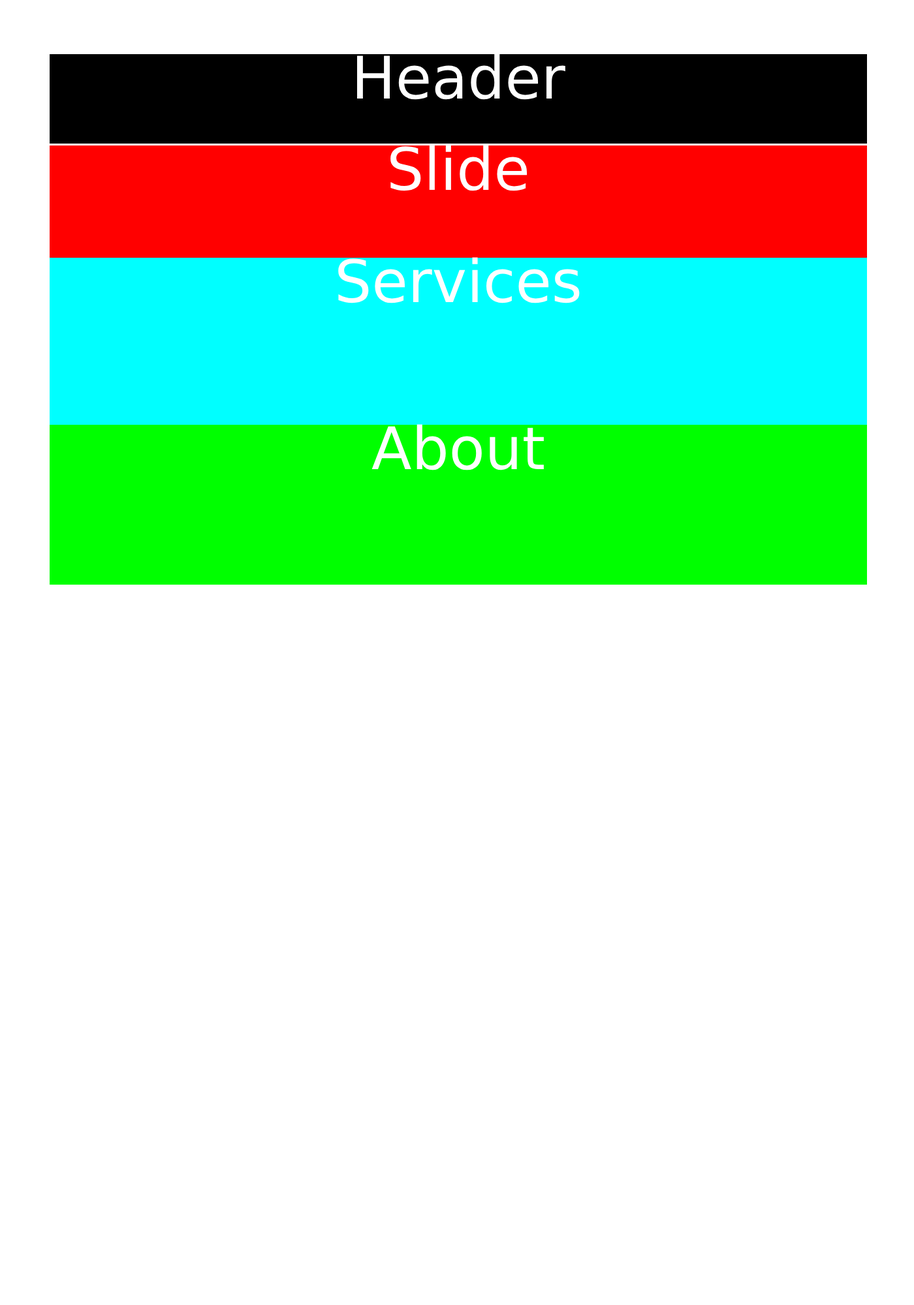
<style>
.page{position:relative;width:914px;height:1305px;background:#ffffff}
.page>*{position:absolute;margin:0}
.t1{font:58.7px "DejaVuSans";color:#ffffff}
</style>
<div class="page">
<p class="t1" style="left:356px;top:54px;width:209px;height:46px">Header</p>
<p class="t1" style="left:390px;top:145px;width:137px;height:46px">Slide</p>
<p class="t1" style="left:338px;top:257px;width:241px;height:46px">Services</p>
<p class="t1" style="left:371px;top:424px;width:173px;height:47px">About</p>
</div>
